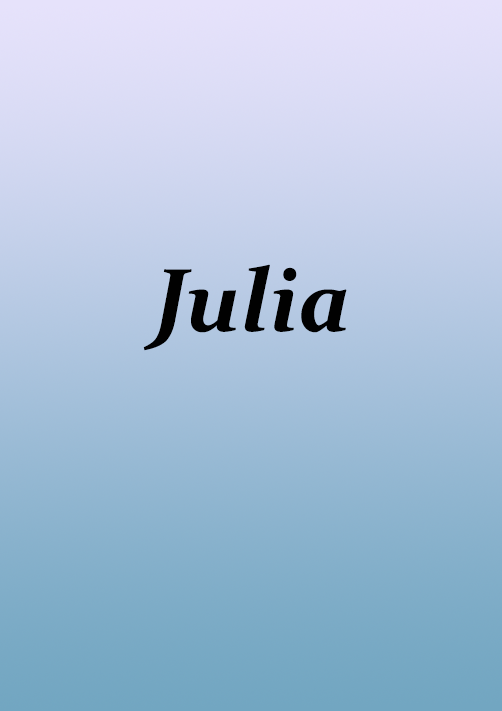
<style>
.page{position:relative;width:502px;height:711px}
.page>*{position:absolute;margin:0}
.t1{font:90px "Constantia-BoldItalic";color:#010101}
</style>
<div class="page">
<p class="t1" style="left:143px;top:264px;width:204px;height:87px">Julia</p>
</div>
